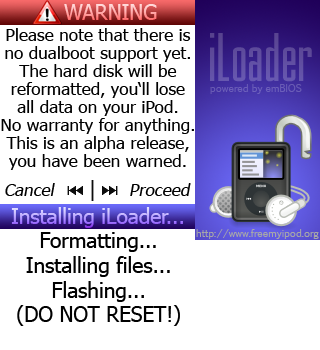
<style>
.page{position:relative;width:320px;height:350px;background:#ffffff}
.page>*{position:absolute;margin:0}
.t1{font:20.8px "Tahoma"}
.t2{font:17.2px/18px "Tahoma";color:#000000}
.t3{font:72px "MekanikLetPlain";color:#614fa3}
.t4{font:10px "EuphemiaCAS";color:#6b5db7}
.t5{font:17.2px "Tahoma";color:#000000;font-style:italic}
.t6{font:20.8px "Tahoma";color:#000000}
.t7{font:10px "EuphemiaCAS";color:#a8a8a8}
</style>
<div class="page">
<p class="t1" style="left:64px;top:4px;width:93px;height:16px">WARNING</p>
<p class="t1" style="left:64px;top:4px;width:93px;height:16px">WARNING</p>
<p class="t2" style="left:1px;top:28px;width:193px;height:142px;text-align:center">Please note that there is<br>no dualboot support yet.<br>The hard disk will be<br>reformatted, you‘ll lose<br>all data on your iPod.<br>No warranty for anything.<br>This is an alpha release,<br>you have been warned.</p>
<p class="t3" style="left:210px;top:33px;width:102px;height:49px">iLoader</p>
<p class="t4" style="left:210px;top:84px;width:92px;height:10px">powered by emBIOS</p>
<p class="t5" style="left:5px;top:183px;width:186px;height:13px">Cancel              Proceed</p>
<p class="t1" style="left:11px;top:207px;width:172px;height:21px">Installing iLoader...</p>
<p class="t1" style="left:11px;top:207px;width:172px;height:21px">Installing iLoader...</p>
<p class="t6" style="left:17px;top:232px;width:163px;height:94px;text-align:center">Formatting...<br>Installing files...<br>Flashing...<br>(DO NOT RESET!)</p>
<p class="t7" style="left:196px;top:229px;width:123px;height:10px">http://www.freemyipod.org</p>
</div>
